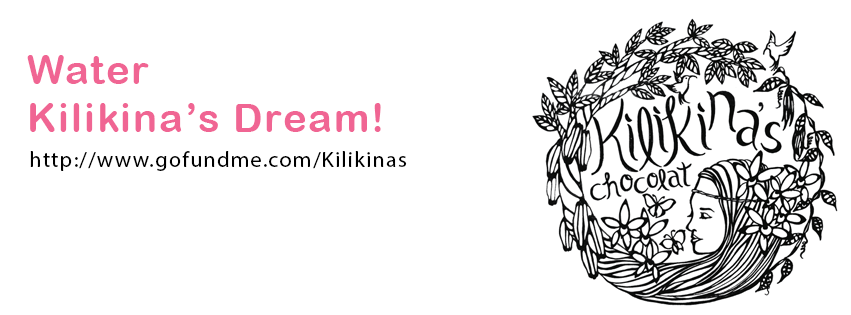
<style>
.page{position:relative;width:851px;height:315px;background:#ffffff}
.page>*{position:absolute;margin:0}
.t1{font:40.5px/48.6px "ArialRoundedMTBold";letter-spacing:0.05em;color:#f06593}
.t2{font:22.1px "MyriadPro-Regular";letter-spacing:0.05em;color:#000000}
</style>
<div class="page">
<p class="t1" style="left:27px;top:55px;width:354px;height:77px">Water <br>Kilikina’s Dream!</p>
<p class="t2" style="left:30px;top:151px;width:377px;height:20px">http://www.gofundme.com/Kilikinas</p>
</div>
